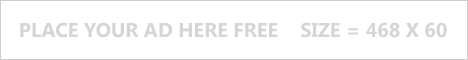
<style>
.page{position:relative;width:468px;height:60px;background:#ffffff}
.page>*{position:absolute;margin:0}
.t1{font:20px "SegoeUI-Bold";color:#d5d5d5}
</style>
<div class="page">
<p class="t1" style="left:20px;top:22px;width:427px;height:16px">PLACE YOUR AD HERE FREE    SIZE = 468 X 60</p>
</div>
